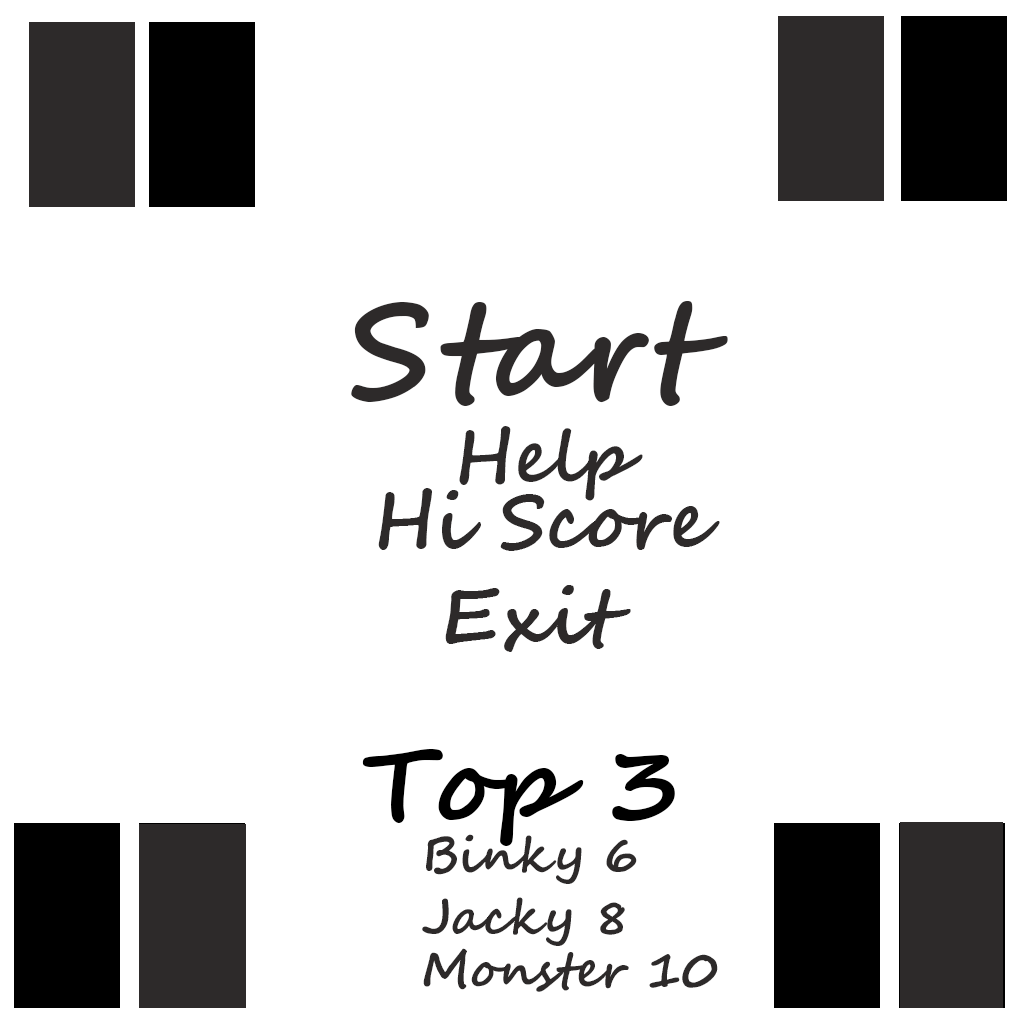
<style>
.page{position:relative;width:1024px;height:1024px;background:#ffffff}
.page>*{position:absolute;margin:0}
.t1{font:133.3px "SegoeScript-Bold";color:#2d2a2a}
.t2{font:71.9px "SegoeScript-Bold";color:#2d2a2a}
.t3{font:75.6px "SegoeScript-Bold";color:#2d2a2a}
.t4{font:76.4px "SegoeScript-Bold";color:#2d2a2a}
.t5{font:103.3px "SegoeScript-Bold";color:#000000}
.t6{font:49.1px "SegoeScript-Bold";color:#2d2a2a}
</style>
<div class="page">
<p class="t1" style="left:351px;top:301px;width:377px;height:105px">Start</p>
<p class="t2" style="left:459px;top:426px;width:184px;height:75px">Help</p>
<p class="t3" style="left:378px;top:488px;width:342px;height:63px">Hi Score</p>
<p class="t4" style="left:445px;top:585px;width:186px;height:67px">Exit</p>
<p class="t5" style="left:362px;top:749px;width:313px;height:97px">Top 3</p>
<p class="t6" style="left:426px;top:834px;width:211px;height:50px">Binky 6</p>
<p class="t6" style="left:422px;top:897px;width:203px;height:49px">Jacky 8</p>
<p class="t6" style="left:423px;top:948px;width:295px;height:44px">Monster 10</p>
</div>
